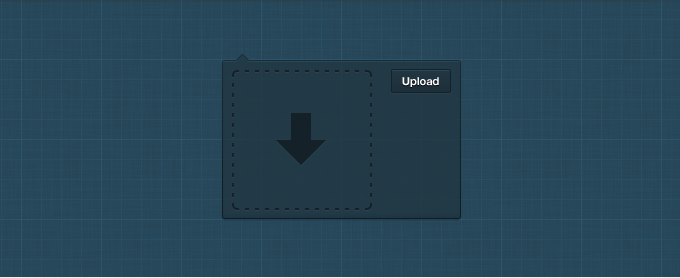
<style>
.page{position:relative;width:680px;height:278px}
.page>*{position:absolute;margin:0}
.t1{font:11px "HelveticaNeue-Bold";color:#ffffff}
</style>
<div class="page">
<p class="t1" style="left:402px;top:77px;width:37px;height:10px">Upload</p>
</div>
